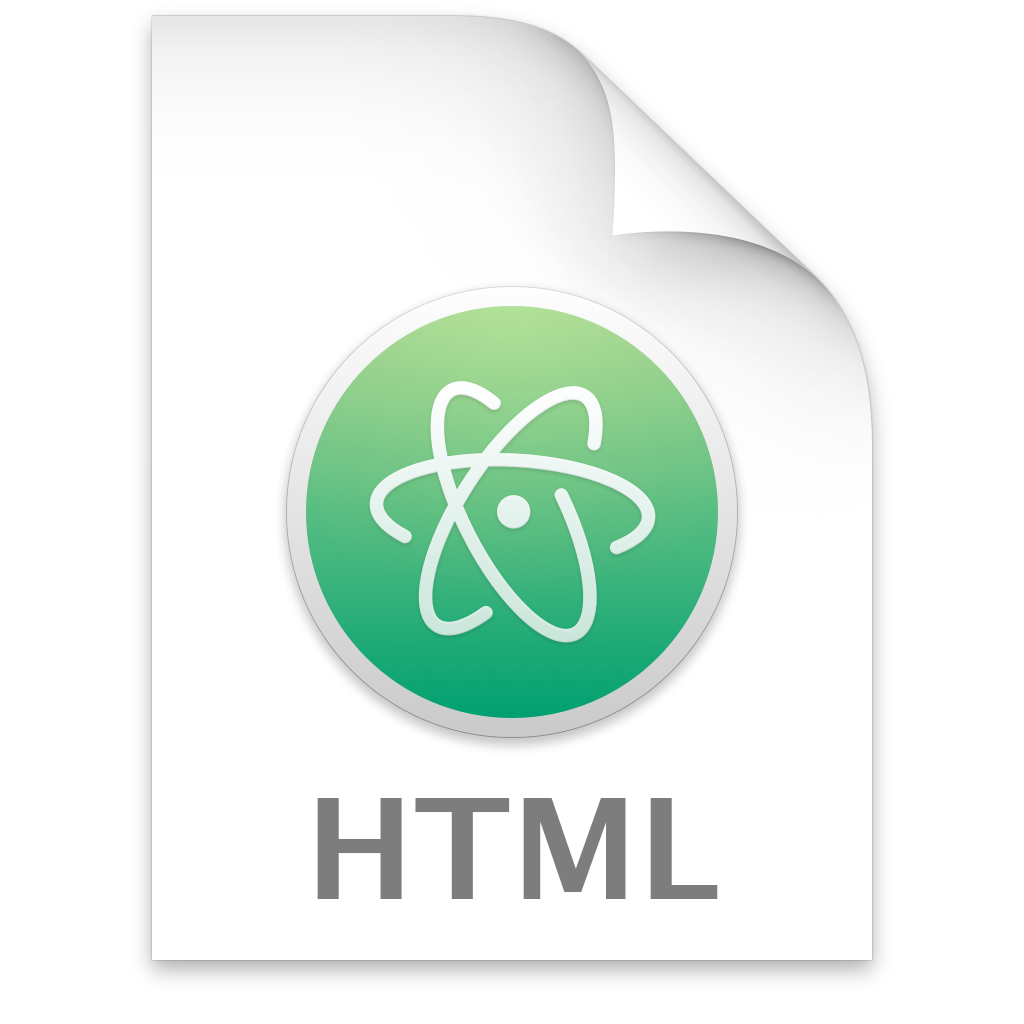
<style>
.page{position:relative;width:1024px;height:1024px;background:#ffffff}
.page>*{position:absolute;margin:0}
.t1{font:140px "LucidaGrande-Bold";color:#7d7d7d}
</style>
<div class="page">
<p class="t1" style="left:317px;top:798px;width:401px;height:101px">HTML</p>
</div>
